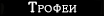
<style>
.page{position:relative;width:104px;height:16px;background:#000000}
.page>*{position:absolute;margin:0}
.t1{font:14px "CooperLightCBT";letter-spacing:0.07em;color:#ffffff;font-variant:small-caps;font-weight:bold}
</style>
<div class="page">
<p class="t1" style="left:28px;top:1px;width:49px;height:12px">Трофеи</p>
</div>
